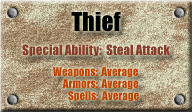
<style>
.page{position:relative;width:192px;height:112px}
.page>*{position:absolute;margin:0}
.t1{font:24px "Impact";color:#000000}
.t2{font:13px "Impact";color:#853c2f}
.t3{font:11px "Impact";color:#be4208}
</style>
<div class="page">
<p class="t1" style="left:71px;top:12px;width:50px;height:20px">Thief</p>
<p class="t2" style="left:22px;top:44px;width:148px;height:13px">Special Ability:  Steal Attack</p>
<p class="t3" style="left:53px;top:67px;width:85px;height:11px">Weapons:  Average</p>
<p class="t3" style="left:62px;top:79px;width:77px;height:11px">Armors:  Average</p>
<p class="t3" style="left:68px;top:91px;width:71px;height:11px">Spells:  Average</p>
</div>
